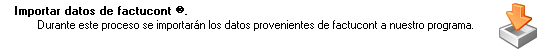
<style>
.page{position:relative;width:552px;height:52px;background:#ffffff}
.page>*{position:absolute;margin:0}
.t1{font:11.4px "MS Sans Serif";color:#000000;font-weight:bold}
.t2{font:11.4px "MS Sans Serif";color:#000000}
</style>
<div class="page">
<p class="t1" style="left:15px;top:6px;width:172px;height:11px">Importar datos de factucont ®.</p>
<p class="t2" style="left:38px;top:20px;width:435px;height:11px">Durante este proceso se importarán los datos provenientes de factucont a nuestro programa.</p>
</div>
